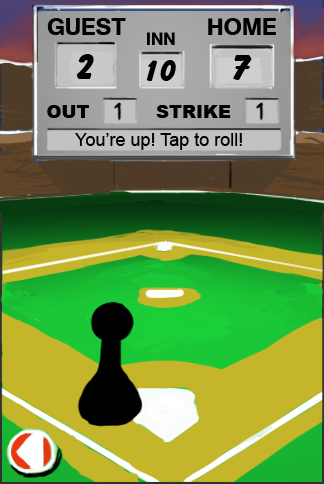
<style>
.page{position:relative;width:324px;height:484px}
.page>*{position:absolute;margin:0}
.t1{font:24px "AGSchulbuchTwoBQ-Medium";color:#010101}
.t2{font:18px "AGSchulbuchTwoBQ-Medium";color:#010101}
.t3{font:36px "BalloonBQ";color:#010101}
.t4{font:30px "BalloonBQ";color:#010101}
.t5{font:18px "Arial-Black";color:#010101}
.t6{font:18px "ArialMT";color:#010101}
</style>
<div class="page">
<p class="t1" style="left:47px;top:18px;width:79px;height:17px">GUEST</p>
<p class="t1" style="left:208px;top:18px;width:68px;height:17px">HOME</p>
<p class="t2" style="left:147px;top:32px;width:28px;height:13px">INN</p>
<p class="t3" style="left:76px;top:54px;width:18px;height:25px">2</p>
<p class="t4" style="left:147px;top:60px;width:29px;height:21px">10</p>
<p class="t3" style="left:233px;top:55px;width:19px;height:25px">7</p>
<p class="t5" style="left:47px;top:105px;width:42px;height:13px">OUT</p>
<p class="t5" style="left:156px;top:105px;width:75px;height:13px">STRIKE</p>
<p class="t6" style="left:75px;top:133px;width:167px;height:17px">You’re up! Tap to roll!</p>
</div>
